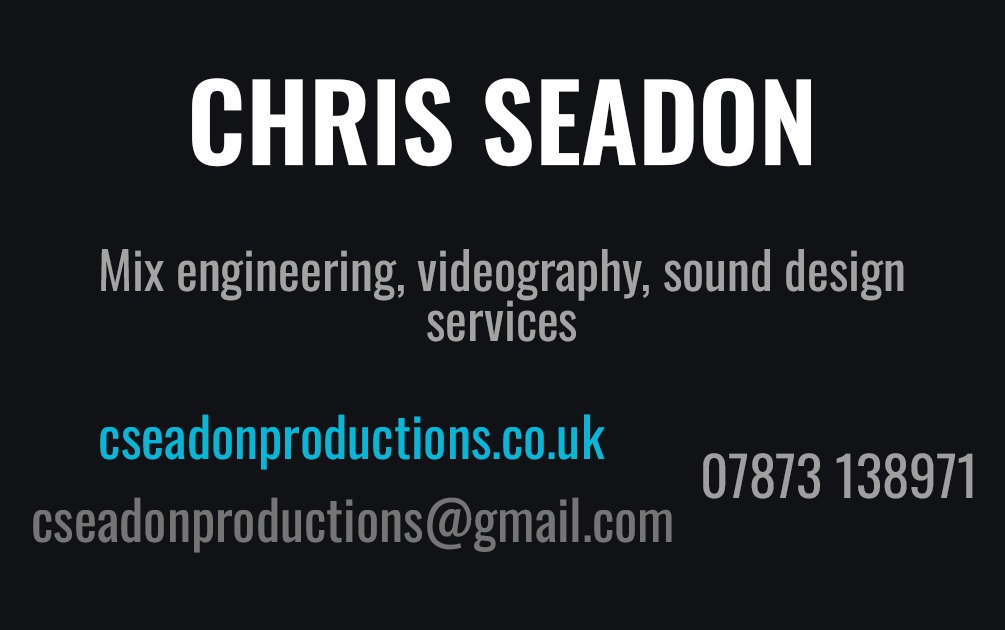
<style>
.page{position:relative;width:1005px;height:630px;background:#111215}
.page>*{position:absolute;margin:0}
.t1{font:105.6px "Oswald-SemiBold";color:#ffffff}
.t2{font:51.8px/50.2px "Oswald-Regular";color:#a3a3a3}
.t3{font:54.8px "Oswald-Regular";color:#08b7d7}
.t4{font:54.8px "Oswald-Regular";color:#9f9f9f}
.t5{font:54.8px "Oswald-Regular";color:#757576}
</style>
<div class="page">
<p class="t1" style="left:192px;top:78px;width:619px;height:89px">CHRIS SEADON</p>
<p class="t2" style="left:101px;top:249px;width:803px;height:93px;text-align:center">Mix engineering, videography, sound design<br>services</p>
<p class="t3" style="left:100px;top:414px;width:505px;height:56px">cseadonproductions.co.uk</p>
<p class="t4" style="left:703px;top:453px;width:270px;height:46px">07873 138971</p>
<p class="t5" style="left:33px;top:497px;width:639px;height:56px">cseadonproductions@gmail.com</p>
</div>
